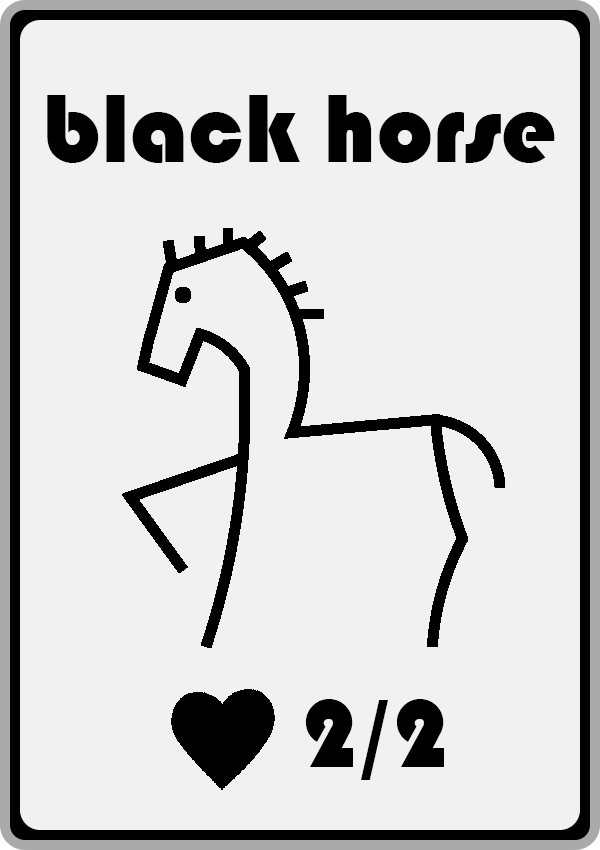
<style>
.page{position:relative;width:600px;height:850px;background:#f1f1f1}
.page>*{position:absolute;margin:0}
.t1{font:100px "Bauhaus93";color:#000000}
</style>
<div class="page">
<p class="t1" style="left:47px;top:95px;width:508px;height:68px">black horse</p>
<p class="t1" style="left:305px;top:699px;width:139px;height:81px">2/2</p>
</div>
